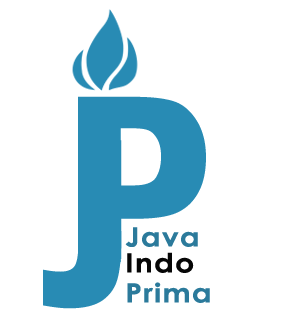
<style>
.page{position:relative;width:282px;height:325px;background:#ffffff}
.page>*{position:absolute;margin:0}
.t1{font:26.7px/26px "CenturyGothic-Bold";letter-spacing:0.04em;color:#2b7a9b;scale:1.12 1}
.t2{font:26.7px/26px "CenturyGothic-Bold";letter-spacing:0.04em;color:#060606;scale:1.12 1}
</style>
<div class="page">
<p class="t1" style="left:125px;top:227px;width:85px;height:76px">Java <br><span class="t2">Indo</span> <br>Prima</p>
</div>
